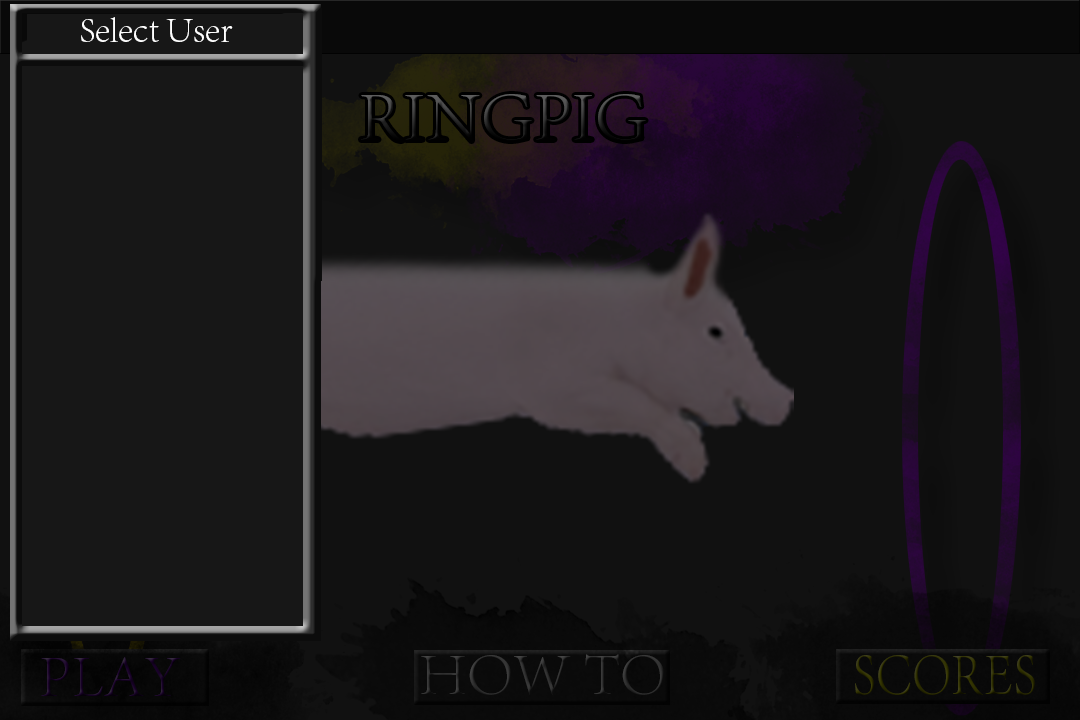
<style>
.page{position:relative;width:1080px;height:720px;background:#111111}
.page>*{position:absolute;margin:0}
.t1{font:36px "AdobeSongStd-Light";color:#ffffff}
.t2{font:72px "AdobeSongStd-Light"}
.t3{font:60px "AdobeSongStd-Light";color:#303030}
.t4{font:60px "AdobeSongStd-Light";color:#180128}
.t5{font:60px "AdobeSongStd-Light";color:#313100;scale:0.86 1}
</style>
<div class="page">
<p class="t1" style="left:81px;top:17px;width:152px;height:25px">Select User</p>
<p class="t2" style="left:361px;top:94px;width:285px;height:47px">RINGPIG</p>
<p class="t3" style="left:421px;top:654px;width:243px;height:41px">HOW TO</p>
<p class="t4" style="left:41px;top:657px;width:140px;height:39px">PLAY</p>
<p class="t5" style="left:855px;top:655px;width:180px;height:40px">SCORES</p>
</div>
